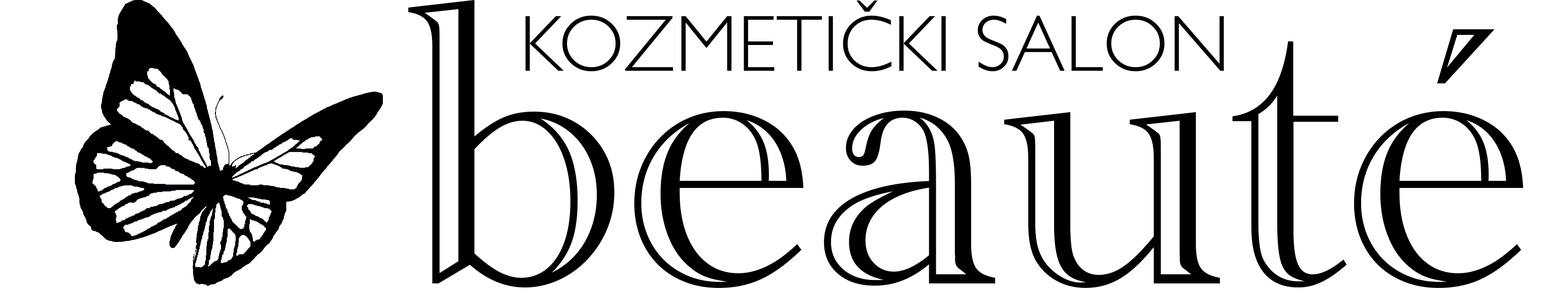
<style>
.page{position:relative;width:1568px;height:295px;background:#ffffff}
.page>*{position:absolute;margin:0}
.t1{font:420.1px "AcademyEngravedLetPlain";color:#000000}
.t2{font:79.9px "GillSans-Light";color:#000000}
</style>
<div class="page">
<p class="t1" style="left:408px;top:0px;width:1115px;height:288px">beauté</p>
<p class="t2" style="left:526px;top:1px;width:698px;height:70px">KOZMETIČKI SALON</p>
</div>
